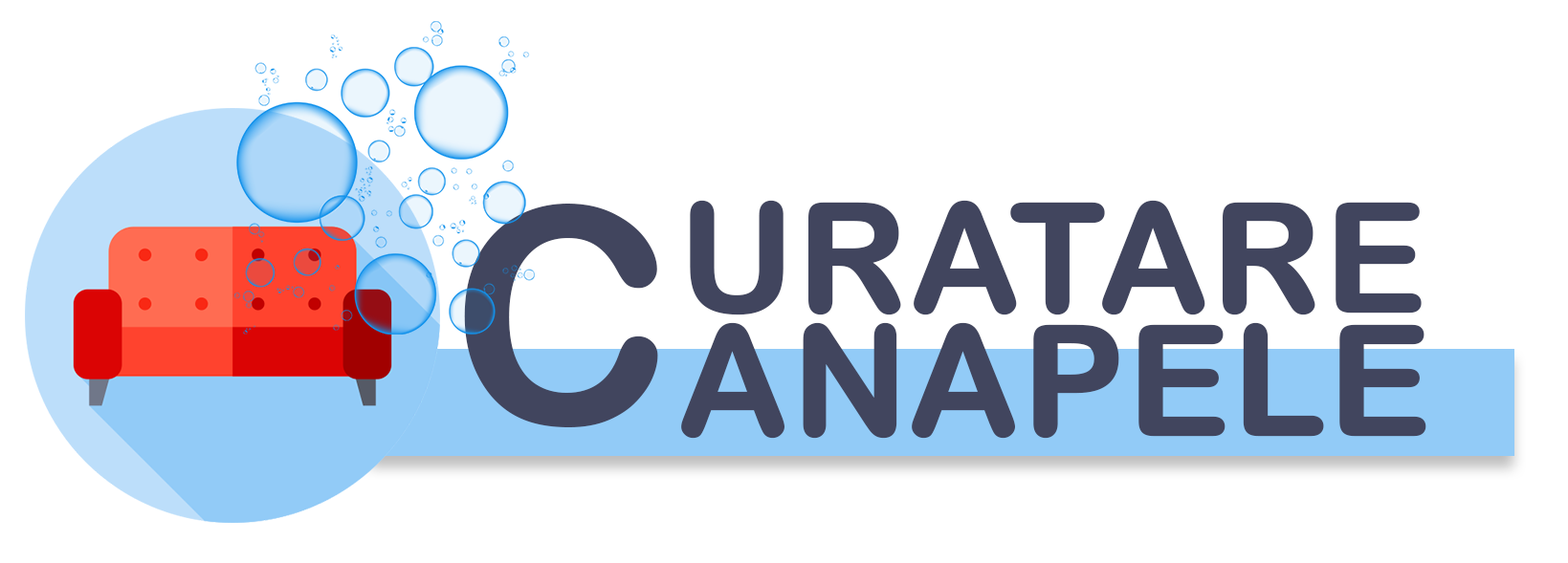
<style>
.page{position:relative;width:1568px;height:563px;background:#ffffff}
.page>*{position:absolute;margin:0}
.t1{font:302.7px "ArialRoundedMTBold";color:#41455e}
.t2{font:151.4px "ArialRoundedMTBold";color:#41455e;font-weight:bold}
.t3{font:152px "ArialRoundedMTBold";color:#41455e;font-weight:bold}
</style>
<div class="page">
<p class="t1" style="left:464px;top:204px;width:194px;height:224px">C</p>
<p class="t2" style="left:690px;top:200px;width:732px;height:116px">URATARE</p>
<p class="t3" style="left:681px;top:322px;width:745px;height:117px">ANAPELE</p>
</div>
